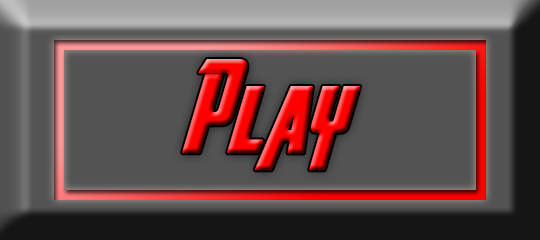
<style>
.page{position:relative;width:540px;height:240px;background:#535353}
.page>*{position:absolute;margin:0}
.t1{font:90.7px "AvengeanceHeroicAvengerItalic";font-weight:bold}
</style>
<div class="page">
<p class="t1" style="left:182px;top:59px;width:178px;height:112px">Play</p>
</div>
